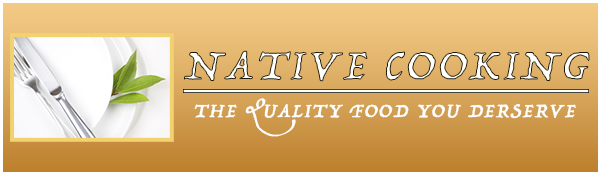
<style>
.page{position:relative;width:600px;height:175px}
.page>*{position:absolute;margin:0}
.t1{font:82.2px "Trattatello";letter-spacing:0.05em;text-transform:uppercase;font-style:italic}
.t2{font:37.5px "Trattatello";letter-spacing:0.05em;color:#fffffe;text-transform:uppercase;font-style:italic}
</style>
<div class="page">
<p class="t1" style="left:183px;top:50px;width:407px;height:32px">NATIVE COOKING</p>
<p class="t2" style="left:194px;top:98px;width:382px;height:39px">The quality food you derserve</p>
</div>
